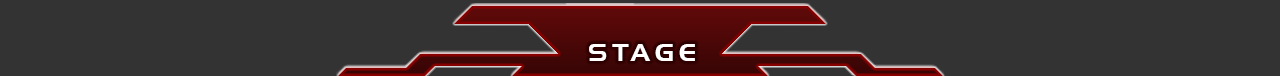
<style>
.page{position:relative;width:1280px;height:76px;background:#333333}
.page>*{position:absolute;margin:0}
.t1{font:23.1px "HandelGothicBT-Regular";letter-spacing:0.2em;color:#ffffff;scale:1.11 1}
</style>
<div class="page">
<p class="t1" style="left:589px;top:44px;width:106px;height:17px">STAGE</p>
</div>
